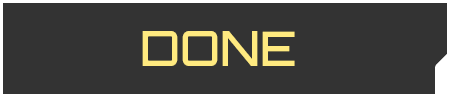
<style>
.page{position:relative;width:450px;height:97px;background:#333333}
.page>*{position:absolute;margin:0}
.t1{font:48px "Orbitron-Medium";color:#ffea80;text-transform:uppercase}
</style>
<div class="page">
<p class="t1" style="left:142px;top:31px;width:153px;height:35px">Done</p>
</div>
